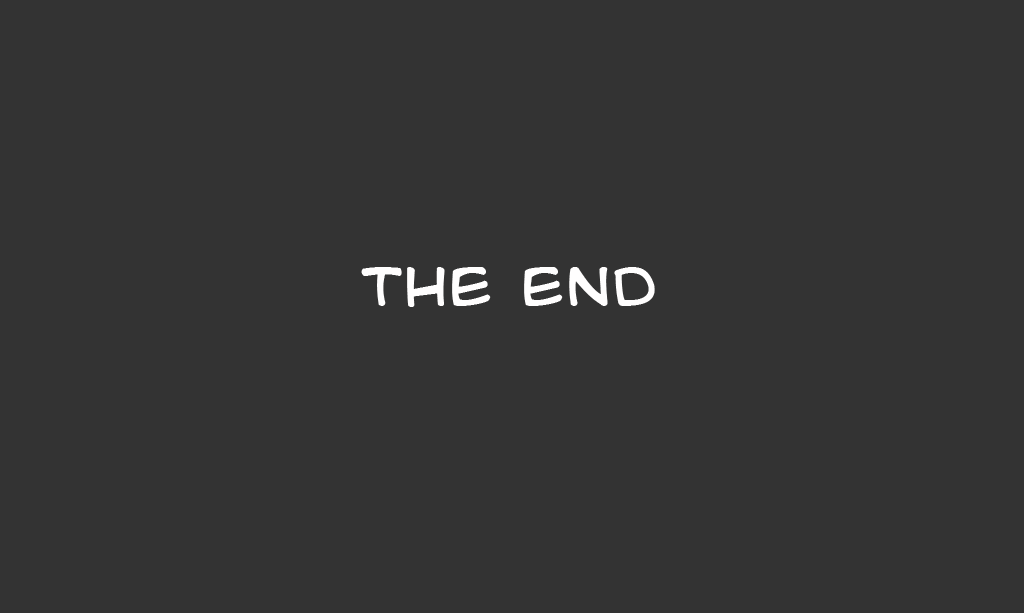
<style>
.page{position:relative;width:1024px;height:613px;background:#333333}
.page>*{position:absolute;margin:0}
.t1{font:48px "KidKosmic";color:#fffefe}
</style>
<div class="page">
<p class="t1" style="left:361px;top:267px;width:294px;height:40px">The End</p>
</div>
